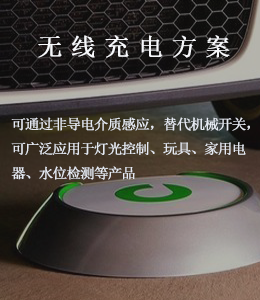
<style>
.page{position:relative;width:260px;height:300px}
.page>*{position:absolute;margin:0}
.t1{font:24px "SimSun";letter-spacing:0.32em;color:#f7f8fb;font-weight:bold;scale:1.04 1}
.t2{font:14px "SimSun";letter-spacing:-0.08em;color:#e5e9f1;font-weight:bold;scale:1.04 1}
</style>
<div class="page">
<p class="t1" style="left:38px;top:35px;width:192px;height:23px">无线充电方案</p>
<p class="t2" style="left:11px;top:117px;width:239px;height:63px">可通过非导电介质感应，替代机械开关，<br>可广泛应用于灯光控制、玩具、家用电<br>器、水位检测等产品</p>
</div>
